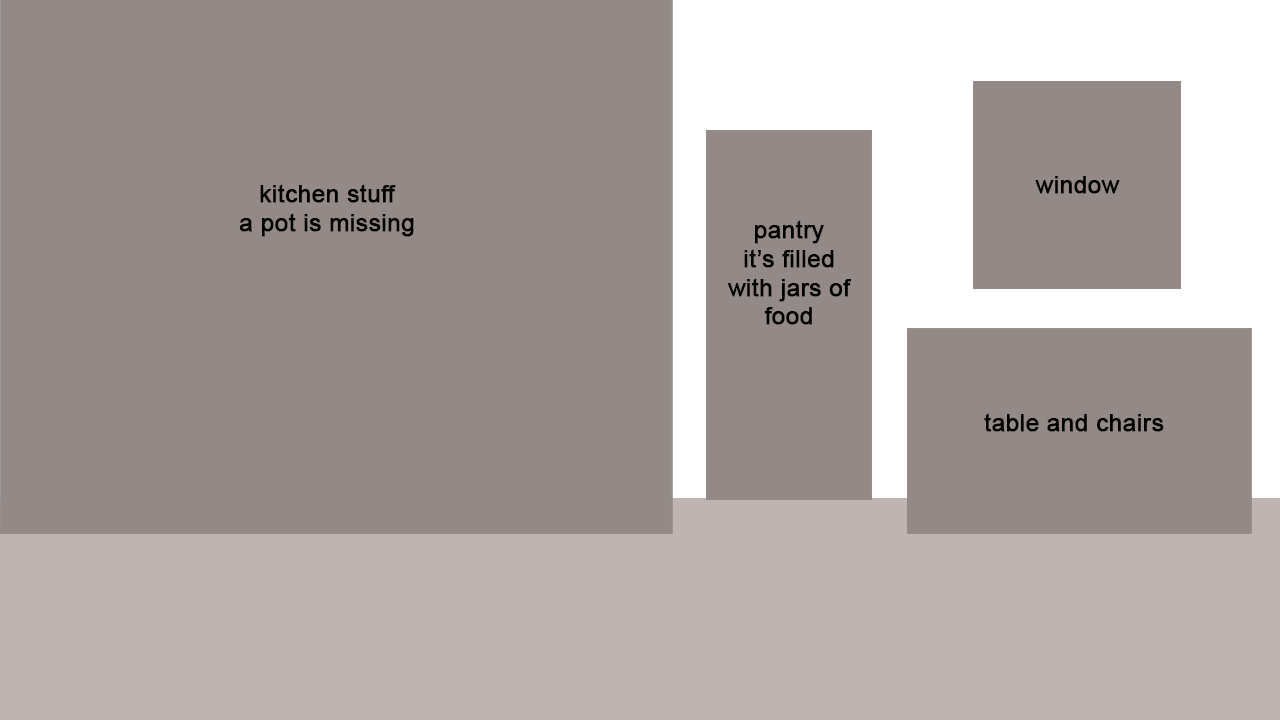
<style>
.page{position:relative;width:1280px;height:720px;background:#938a87}
.page>*{position:absolute;margin:0}
.t1{font:24px "ArialMT";color:#000000;font-weight:bold}
</style>
<div class="page">
<p class="t1" style="left:239px;top:184px;width:175px;height:53px;text-align:center">kitchen stuff<br>a pot is missing</p>
<p class="t1" style="left:1035px;top:176px;width:85px;height:18px">window</p>
<p class="t1" style="left:727px;top:220px;width:125px;height:105px;text-align:center">pantry<br>it’s filled<br>with jars of<br>food</p>
<p class="t1" style="left:984px;top:413px;width:180px;height:19px">table and chairs</p>
</div>
